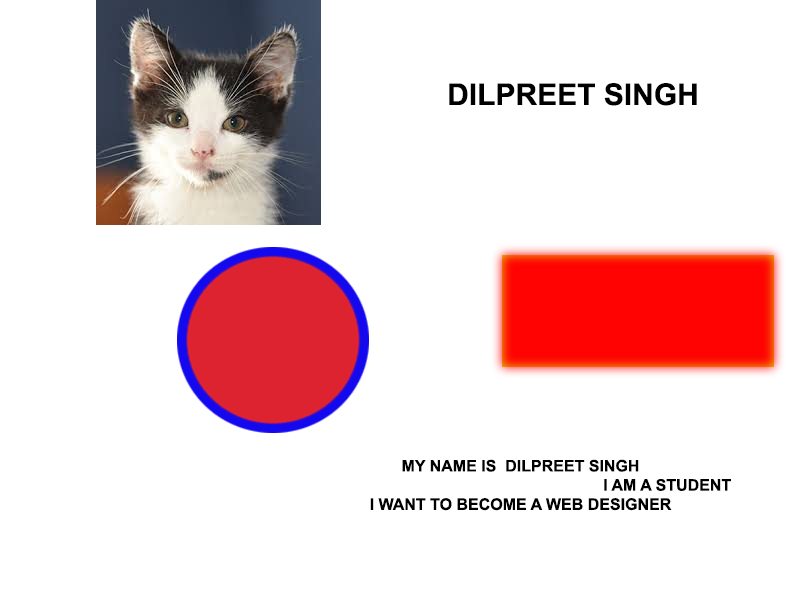
<style>
.page{position:relative;width:800px;height:600px;background:#ffffff}
.page>*{position:absolute;margin:0}
.t1{font:30px "Arial-BoldMT";color:#000000}
.t2{font:16px "Arial-BoldMT";color:#000000}
</style>
<div class="page">
<p class="t1" style="left:449px;top:83px;width:248px;height:23px">DILPREET SINGH</p>
<p class="t2" style="left:370px;top:459px;width:361px;height:52px;text-align:center">MY NAME IS  DILPREET SINGH<br>                                                                  I AM A STUDENT<br>I WANT TO BECOME A WEB DESIGNER</p>
</div>
